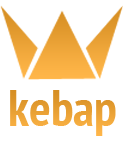
<style>
.page{position:relative;width:123px;height:151px;background:#ffffff}
.page>*{position:absolute;margin:0}
.t1{font:50.8px "PTSans-NarrowBold";color:#e9a135}
</style>
<div class="page">
<p class="t1" style="left:10px;top:90px;width:106px;height:46px">kebap</p>
</div>
